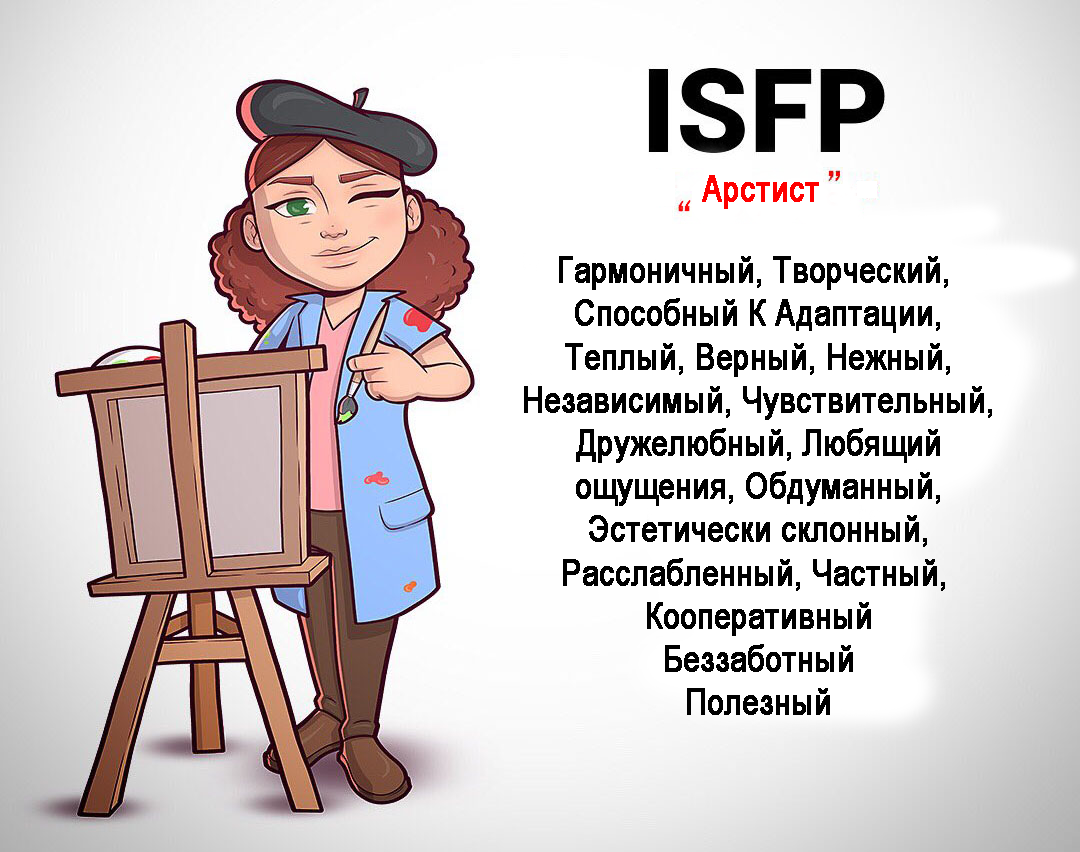
<style>
.page{position:relative;width:1080px;height:852px;background:#ffffff}
.page>*{position:absolute;margin:0}
.t1{font:36px "ArialNarrow";color:#fe0000;font-weight:bold}
.t2{font:36px "ArialNarrow";color:#000000;font-weight:bold}
</style>
<div class="page">
<p class="t1" style="left:702px;top:175px;width:117px;height:34px">Арстист</p>
<p class="t2" style="left:524px;top:256px;width:468px;height:459px;text-align:center">Гармоничный, Творческий, <br>Способный К Адаптации,<br>Теплый, Верный, Нежный,<br>Независимый, Чувствительный,<br>Дружелюбный, Любящий<br>ощущения, Обдуманный,<br>Эстетически склонный,<br>Расслабленный, Частный, <br>Кооперативный<br>Беззаботный<br>Полезный</p>
</div>
